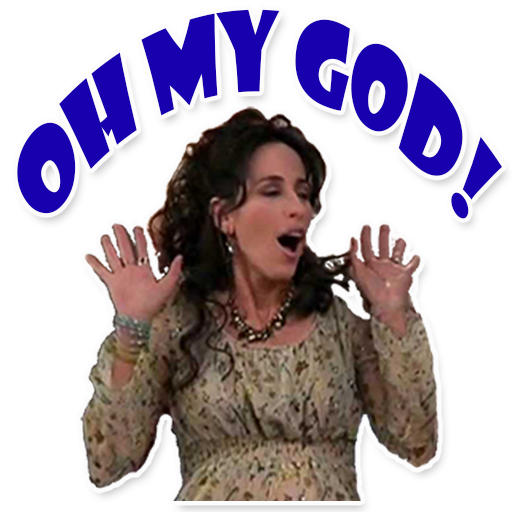
<style>
.page{position:relative;width:512px;height:512px;background:#ffffff}
.page>*{position:absolute;margin:0}
.t1{font:108.9px "ShowcardGothic-Reg";color:#1900af;scale:0.63 1}
</style>
<div class="page">
<p class="t1" style="left:17px;top:9px;width:485px;height:210px;text-align:center">OH MY GOD!</p>
</div>
